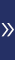
<style>
.page{position:relative;width:15px;height:60px;background:#253065}
.page>*{position:absolute;margin:0}
.t1{font:29.2px "GillSansMTPro-Light";color:#ffffff;scale:0.89 1}
</style>
<div class="page">
<p class="t1" style="left:1px;top:23px;width:13px;height:14px">»</p>
</div>
